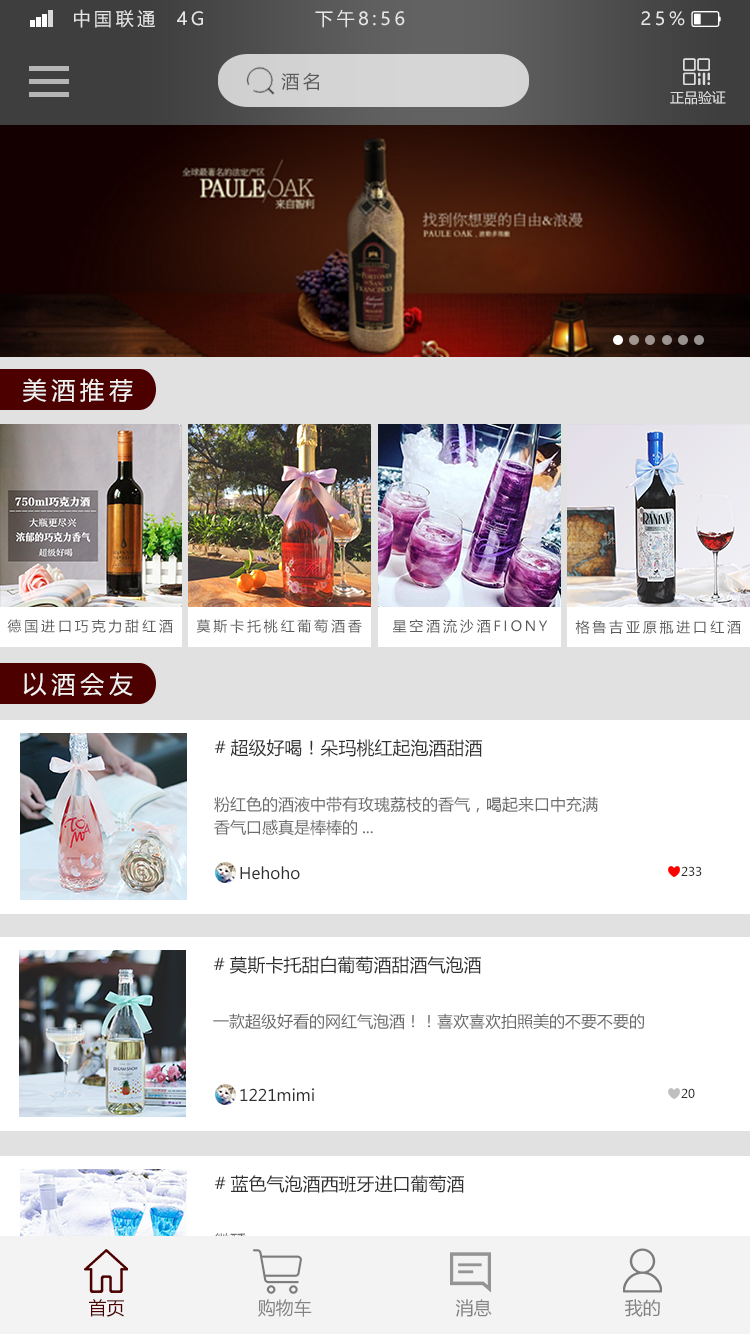
<style>
.page{position:relative;width:750px;height:1334px;background:#ffffff}
.page>*{position:absolute;margin:0}
.t1{font:18px "MicrosoftYaHei";letter-spacing:0.2em;color:#e6e6e6}
.t2{font:18px "MicrosoftYaHei";letter-spacing:0.2em;color:#5b5b5b}
.t3{font:14px "MicrosoftYaHei";color:#dcdcdc}
.t4{font:24px "MicrosoftYaHei";letter-spacing:0.2em;color:#f2f2f2}
.t5{font:14px "MicrosoftYaHei";letter-spacing:0.2em;color:#5d5c5c}
.t6{font:18px "MicrosoftYaHei";color:#303030}
.t7{font:16px "MicrosoftYaHei";color:#6c6c6c}
.t8{font:16px "MicrosoftYaHei";color:#303030}
.t9{font:12px "MicrosoftYaHei";color:#303030}
.t10{font:18px "MicrosoftYaHei";color:#828282}
.t11{font:18px "MicrosoftYaHei";color:#4d0000}
</style>
<div class="page">
<p class="t1" style="left:74px;top:9px;width:611px;height:19px">中国联通  4G            下午8:56                          25%</p>
<p class="t2" style="left:281px;top:72px;width:38px;height:19px">酒名</p>
<p class="t3" style="left:670px;top:91px;width:56px;height:14px">正品验证</p>
<p class="t4" style="left:23px;top:378px;width:110px;height:24px">美酒推荐</p>
<p class="t5" style="left:7px;top:619px;width:166px;height:14px">德国进口巧克力甜红酒</p>
<p class="t5" style="left:196px;top:619px;width:166px;height:14px">莫斯卡托桃红葡萄酒香</p>
<p class="t5" style="left:392px;top:619px;width:156px;height:14px">星空酒流沙酒FIONY</p>
<p class="t5" style="left:575px;top:620px;width:166px;height:14px">格鲁吉亚原瓶进口红酒</p>
<p class="t4" style="left:23px;top:672px;width:110px;height:24px">以酒会友</p>
<p class="t6" style="left:214px;top:739px;width:268px;height:18px">#超级好喝！朵玛桃红起泡酒甜酒</p>
<p class="t7" style="left:214px;top:796px;width:384px;height:17px">粉红色的酒液中带有玫瑰荔枝的香气，喝起来口中充满</p>
<p class="t7" style="left:214px;top:819px;width:159px;height:17px">香气口感真是棒棒的...</p>
<p class="t8" style="left:240px;top:866px;width:60px;height:14px">Hehoho</p>
<p class="t9" style="left:681px;top:866px;width:21px;height:10px">233</p>
<p class="t6" style="left:213px;top:956px;width:268px;height:18px">#莫斯卡托甜白葡萄酒甜酒气泡酒</p>
<p class="t7" style="left:213px;top:1013px;width:431px;height:17px">一款超级好看的网红气泡酒！！喜欢喜欢拍照美的不要不要的</p>
<p class="t8" style="left:240px;top:1088px;width:74px;height:13px">1221mimi</p>
<p class="t9" style="left:681px;top:1088px;width:14px;height:10px">20</p>
<p class="t6" style="left:214px;top:1175px;width:250px;height:18px">#蓝色气泡酒西班牙进口葡萄酒</p>
<p class="t10" style="left:89px;top:1299px;width:571px;height:18px"><span class="t11">首页</span>                         购物车                           消息                         我的</p>
</div>
